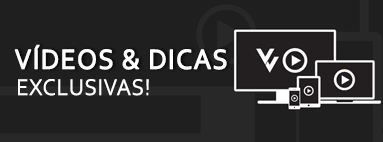
<style>
.page{position:relative;width:383px;height:142px;background:#1f1f1f}
.page>*{position:absolute;margin:0}
.t1{font:29px "Corbel";letter-spacing:0.02em;color:#ffffff;font-weight:bold;scale:0.95 1}
.t2{font:24px "Corbel";letter-spacing:0.02em;color:#ffffff;scale:0.95 1}
</style>
<div class="page">
<p class="t1" style="left:14px;top:44px;width:213px;height:26px">VÍDEOS &amp; DICAS</p>
<p class="t2" style="left:18px;top:79px;width:131px;height:17px">EXCLUSIVAS!</p>
</div>
